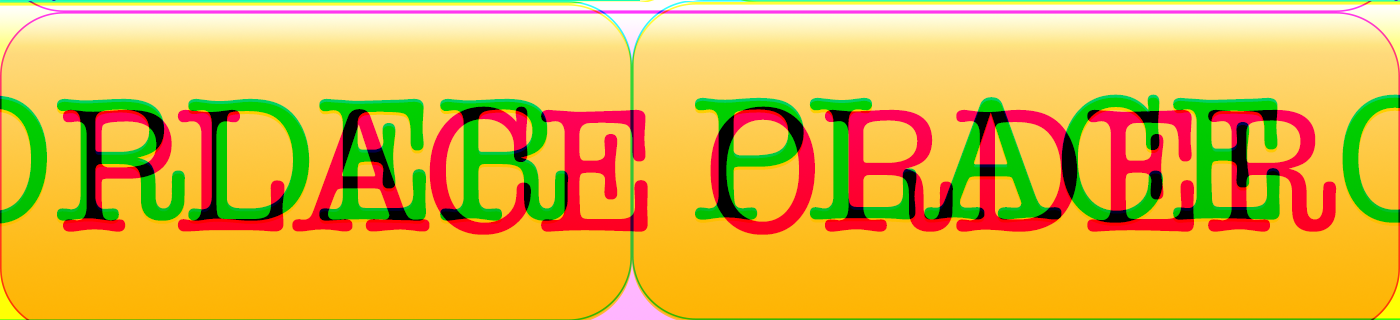
<style>
.page{position:relative;width:1400px;height:320px}
.page>*{position:absolute;margin:0}
.t1{font:180px "AmericanTypewriter"}
</style>
<div class="page">
<p class="t1" style="left:63px;top:94px;width:1274px;height:129px">PLACE ORDER</p>
</div>
